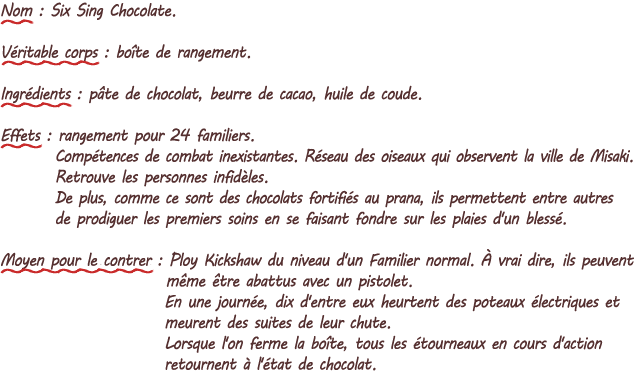
<style>
.page{position:relative;width:636px;height:379px;background:#ffffff}
.page>*{position:absolute;margin:0}
.t1{font:17.3px "MVBoli";letter-spacing:-0.05em;color:#553030;scale:0.9 1}
.t2{font:17.3px "MVBoli";letter-spacing:-0.06em;color:#553030;scale:0.9 1}
</style>
<div class="page">
<p class="t1" style="left:1px;top:2px;width:633px;height:369px">Nom : Six Sing Chocolate.<br><br>Véritable corps : boîte de rangement.<br><br>Ingrédients : pâte de chocolat, beurre de cacao, huile de coude.<br><br>Effets : rangement pour 24 familiers.<br>        <span class="t2">Compétences de combat inexistantes. Réseau des oiseaux qui observent la ville de Misaki.<br></span>        Retrouve les personnes infidèles.<br>        <span class="t2">De plus, comme ce sont des chocolats fortifiés au prana, ils permettent entre autres<br></span>        de prodiguer les premiers soins en se faisant fondre sur les plaies d'un blessé.<br><br>Moyen pour le contrer : Ploy Kickshaw du niveau d'un Familier normal. À vrai dire, ils peuvent<br>                         même être abattus avec un pistolet.<br>                        En une journée, dix d'entre eux heurtent des poteaux électriques et<br>                        meurent des suites de leur chute.<br>                        Lorsque l'on ferme la boîte, tous les étourneaux en cours d'action<br>                        retournent à l'état de chocolat.</p>
</div>
